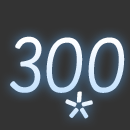
<style>
.page{position:relative;width:130px;height:130px;background:#333333}
.page>*{position:absolute;margin:0}
.t1{font:90px "Farsan-Regular"}
</style>
<div class="page">
<p class="t1" style="left:10px;top:36px;width:115px;height:57px">300</p>
<p class="t1" style="left:65px;top:91px;width:28px;height:28px">*</p>
</div>
